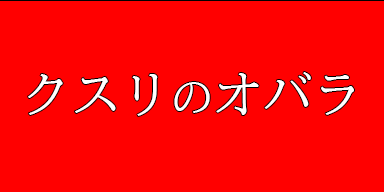
<style>
.page{position:relative;width:384px;height:192px;background:#ff0000}
.page>*{position:absolute;margin:0}
.t1{font:50px "BIZ-UDMincho-Medium";color:#ffffff}
.t2{font:41.7px "BIZ-UDMincho-Medium";color:#ffffff}
</style>
<div class="page">
<p class="t1" style="left:28px;top:72px;width:326px;height:44px">クスリ<span class="t2">の</span>オバラ</p>
</div>
